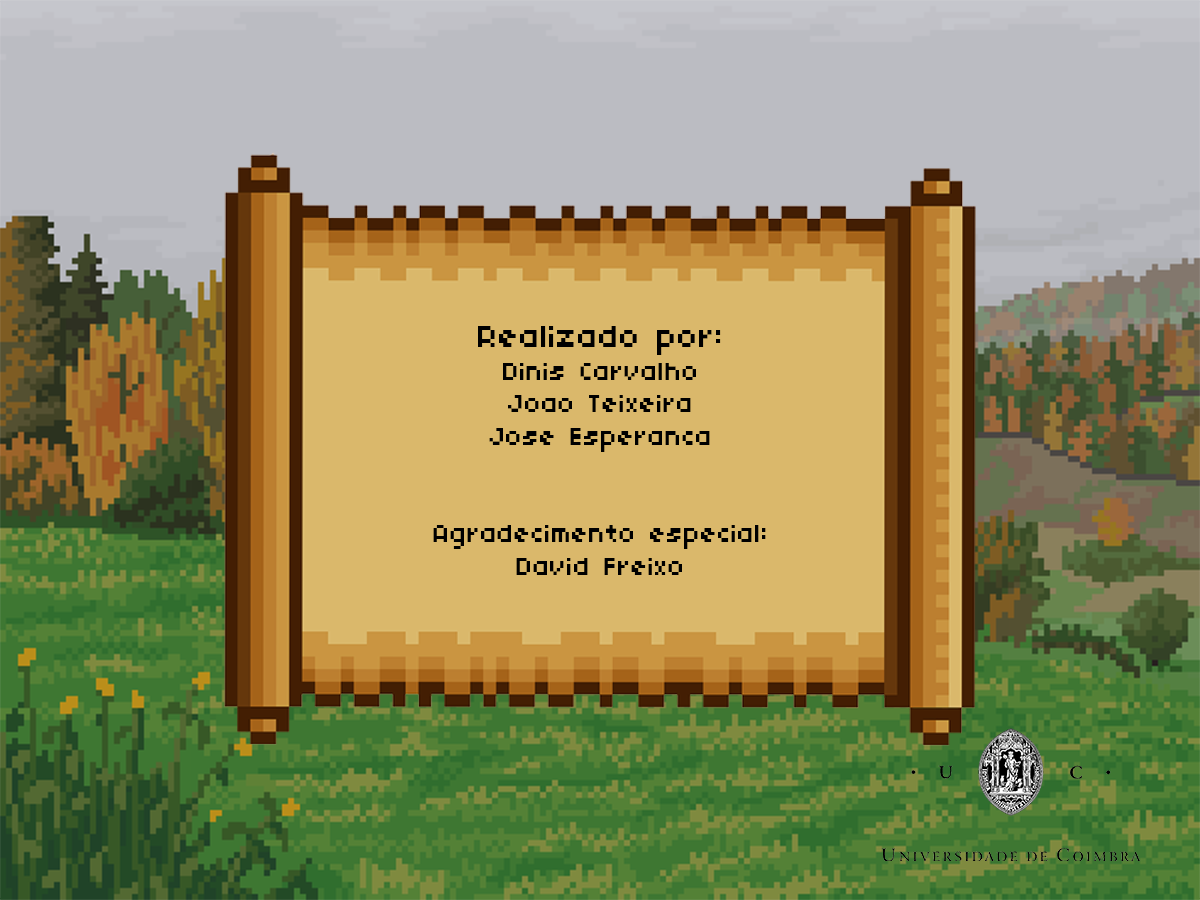
<style>
.page{position:relative;width:1200px;height:900px;background:#bbbcc2}
.page>*{position:absolute;margin:0}
.t1{font:27.1px "04b03";color:#000000}
.t2{font:33.3px "04b03";color:#000000}
</style>
<div class="page">
<p class="t1" style="left:433px;top:326px;width:333px;height:249px;text-align:center"><span class="t2">Realizado por:<br></span>Dinis Carvalho<br>Joao Teixeira<br>Jose Esperanca<br><br><br>Agradecimento especial:<br>David Freixo</p>
</div>
